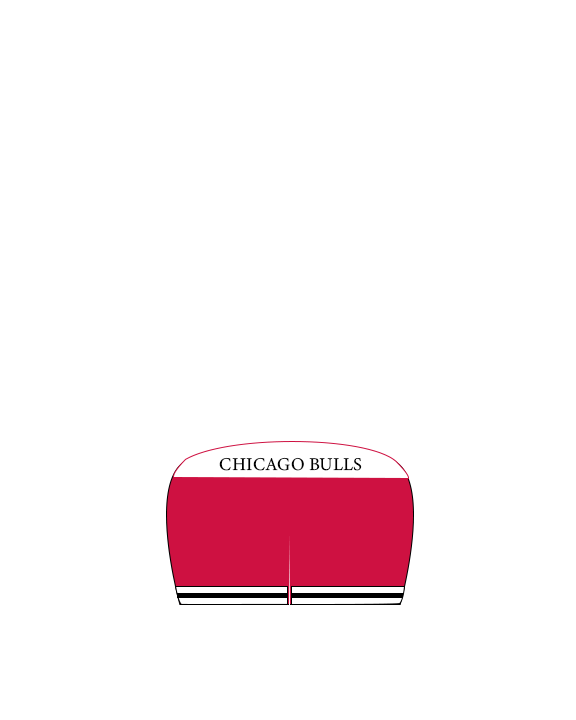
<style>
.page{position:relative;width:576px;height:720px;background:#ffffff}
.page>*{position:absolute;margin:0}
.t1{font:18px "MinionVariableConcept-Roman";color:#000000}
</style>
<div class="page">
<p class="t1" style="left:219px;top:457px;width:143px;height:14px">CHICAGO BULLS</p>
</div>
